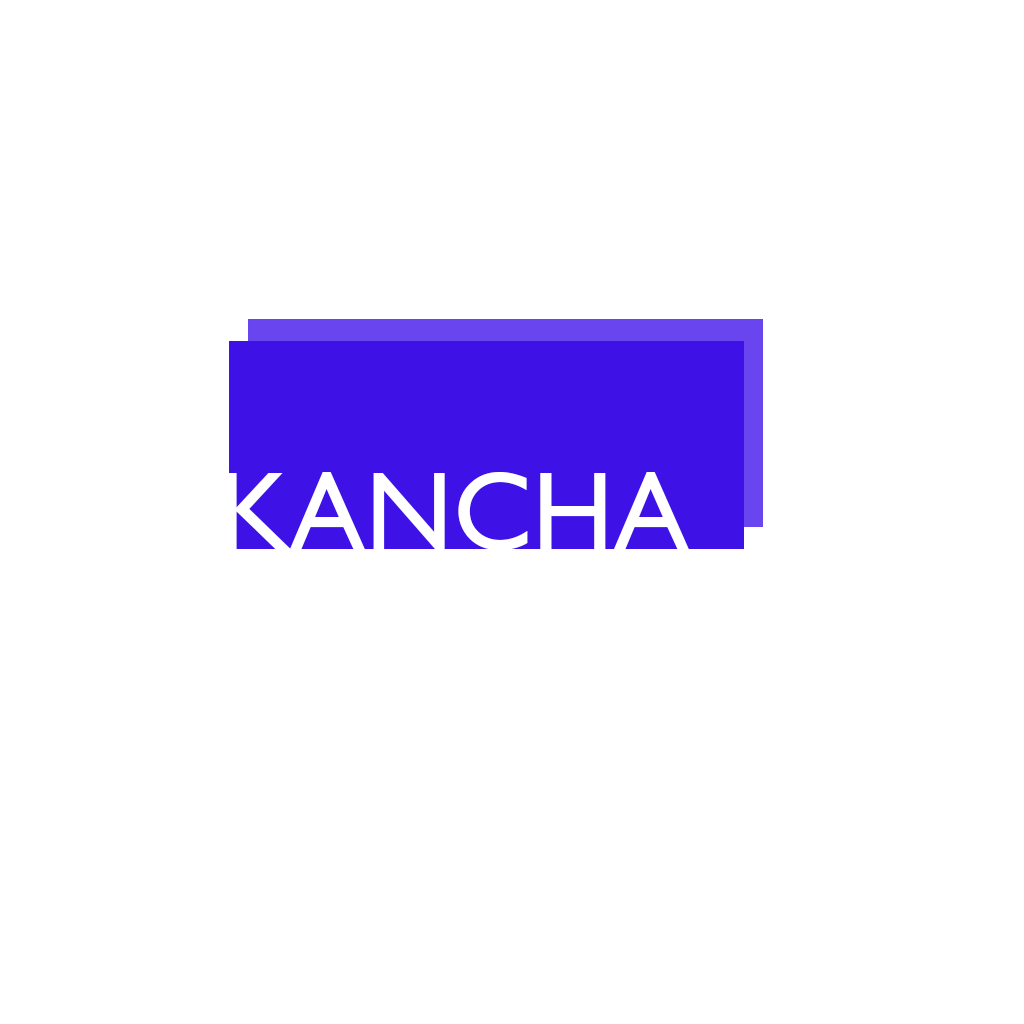
<style>
.page{position:relative;width:1024px;height:1024px;background:#ffffff}
.page>*{position:absolute;margin:0}
.t1{font:112.1px "GillSansMT";color:#ffffff;text-transform:uppercase}
</style>
<div class="page">
<p class="t1" style="left:225px;top:472px;width:464px;height:78px">Kancha</p>
</div>
